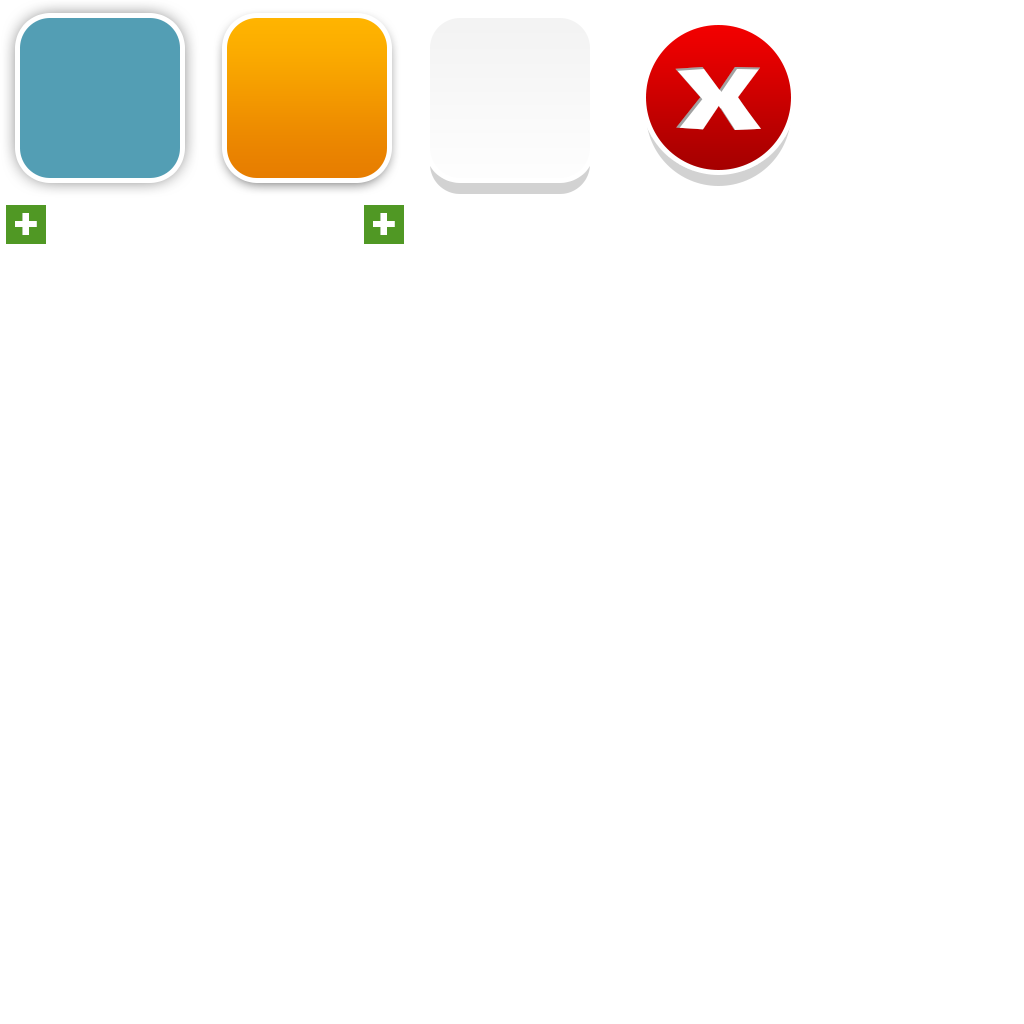
<style>
.page{position:relative;width:1024px;height:1024px;background:#ffffff}
.page>*{position:absolute;margin:0}
.t1{font:89.5px "DimboRegular";color:#ffffff;scale:2.15 1}
.t2{font:52.2px "DimboRegular";color:#ffffff}
</style>
<div class="page">
<p class="t1" style="left:675px;top:67px;width:86px;height:63px">X</p>
<p class="t2" style="left:15px;top:213px;width:22px;height:22px">+</p>
<p class="t2" style="left:373px;top:213px;width:22px;height:22px">+</p>
</div>
